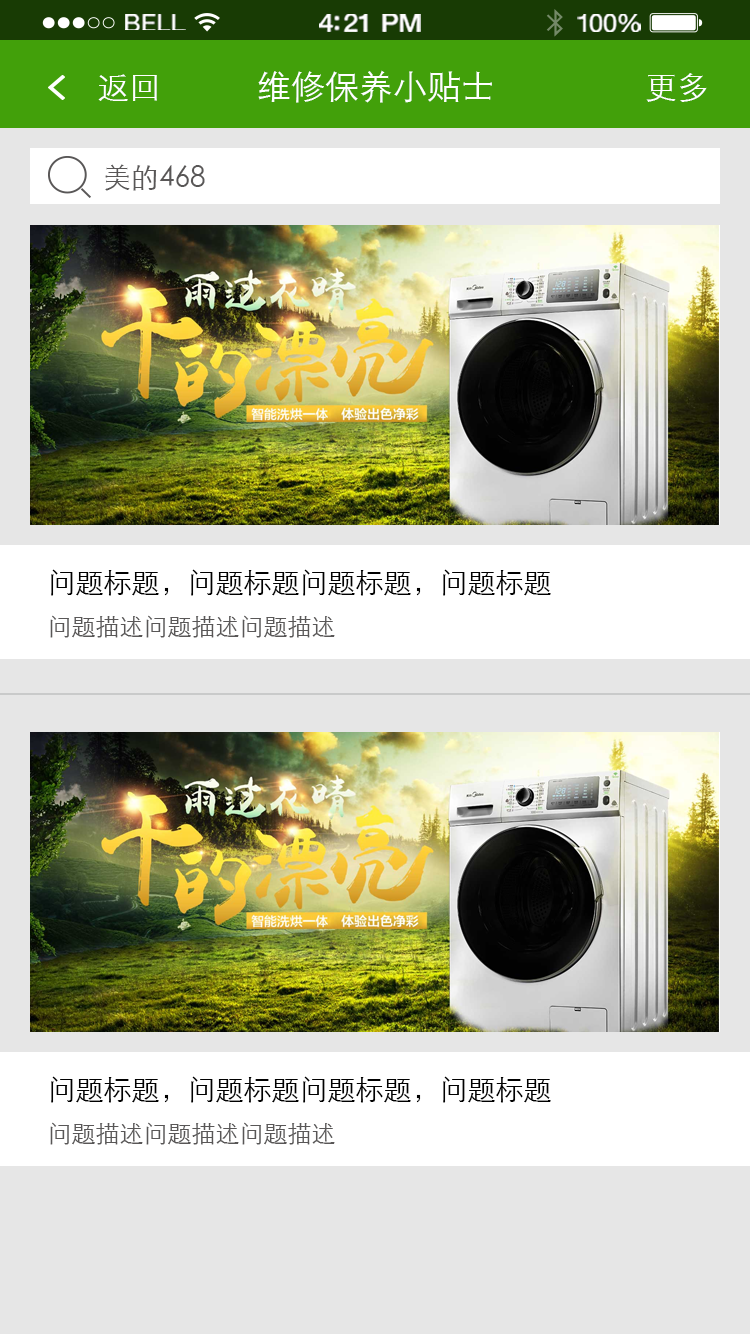
<style>
.page{position:relative;width:750px;height:1334px;background:#e6e6e6}
.page>*{position:absolute;margin:0}
.t1{font:23.3px "HelveticaNeue";letter-spacing:0.02em;color:#ffffff;scale:1.06 1}
.t2{font:25.3px "HelveticaNeue-Medium";letter-spacing:-0.02em;color:#ffffff;scale:1.06 1}
.t3{font:24.3px "HelveticaNeue";letter-spacing:-0.02em;color:#ffffff;scale:1.06 1}
.t4{font:32px "STXihei";color:#ffffff}
.t5{font:34px "STXihei";color:#ffffff}
.t6{font:28px "STXihei";color:#595757}
.t7{font:28px/46px "STXihei";color:#000000}
.t8{font:24px/46px "STXihei";color:#595757}
</style>
<div class="page">
<p class="t1" style="left:125px;top:14px;width:61px;height:16px">BELL</p>
<p class="t2" style="left:319px;top:14px;width:102px;height:18px">4:21 PM</p>
<p class="t3" style="left:577px;top:14px;width:64px;height:18px">100%</p>
<p class="t4" style="left:98px;top:74px;width:59px;height:27px">返回</p>
<p class="t5" style="left:258px;top:70px;width:234px;height:33px">维修保养小贴士</p>
<p class="t4" style="left:646px;top:73px;width:61px;height:29px">更多</p>
<p class="t6" style="left:105px;top:164px;width:100px;height:27px">美的468</p>
<p class="t7" style="left:50px;top:569px;width:501px;height:69px">问题标题，问题标题问题标题，问题标题<br><span class="t8">问题描述问题描述问题描述</span></p>
<p class="t7" style="left:50px;top:1076px;width:501px;height:69px">问题标题，问题标题问题标题，问题标题<br><span class="t8">问题描述问题描述问题描述</span></p>
</div>
